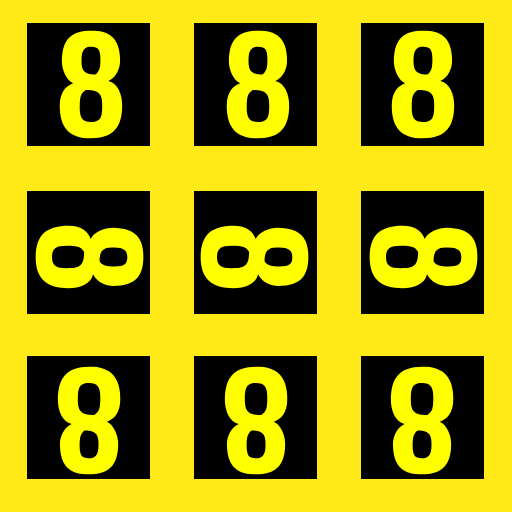
<style>
.page{position:relative;width:512px;height:512px;background:#ffea17}
.page>*{position:absolute;margin:0}
.t1{font:150px "Share-BoldOSF";color:#ffff00}
</style>
<div class="page">
<p class="t1" style="left:59px;top:30px;width:64px;height:109px">8</p>
<p class="t1" style="left:226px;top:30px;width:64px;height:109px">8</p>
<p class="t1" style="left:391px;top:30px;width:64px;height:109px">8</p>
<p class="t1" style="left:35px;top:225px;width:109px;height:64px;rotate:90deg">8</p>
<p class="t1" style="left:200px;top:225px;width:109px;height:64px;rotate:90deg">8</p>
<p class="t1" style="left:369px;top:225px;width:109px;height:64px;rotate:90deg">8</p>
<p class="t1" style="left:57px;top:366px;width:64px;height:109px;rotate:-180deg">8</p>
<p class="t1" style="left:224px;top:366px;width:64px;height:109px;rotate:-180deg">8</p>
<p class="t1" style="left:390px;top:366px;width:64px;height:109px;rotate:-180deg">8</p>
</div>
